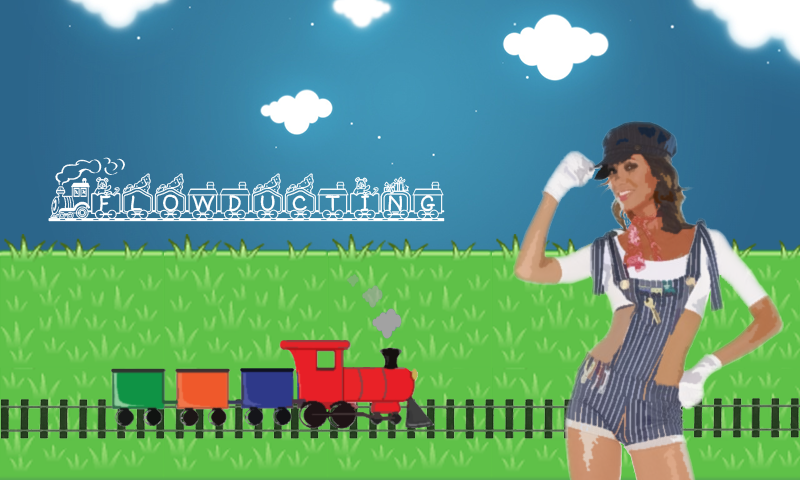
<style>
.page{position:relative;width:800px;height:480px}
.page>*{position:absolute;margin:0}
.t1{font:48px "ToyTrain";color:#ffffff}
</style>
<div class="page">
<p class="t1" style="left:48px;top:157px;width:397px;height:65px">Flowducting</p>
</div>
